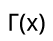
<style>
.page{position:relative;width:53px;height:41px;background:#ffffff}
.page>*{position:absolute;margin:0}
.t1{font:23.7px "DroidSans";color:#000000}
</style>
<div class="page">
<p class="t1" style="left:9px;top:13px;width:36px;height:22px">Г(x)</p>
</div>
